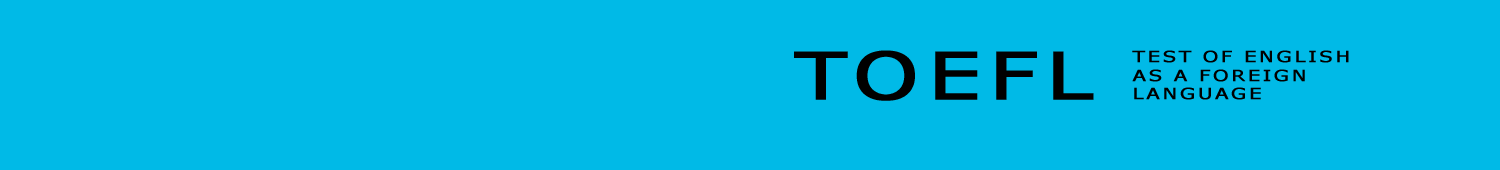
<style>
.page{position:relative;width:1500px;height:170px;background:#00bae7}
.page>*{position:absolute;margin:0}
.t1{font:65.5px "Verdana";letter-spacing:0.1em;color:#000000;font-weight:bold;scale:1.27 1}
.t2{font:15.5px "Verdana";letter-spacing:0.1em;color:#000000;text-transform:uppercase;font-weight:bold;scale:1.27 1}
</style>
<div class="page">
<p class="t1" style="left:794px;top:50px;width:300px;height:51px">TOEFL</p>
<p class="t2" style="left:1132px;top:50px;width:217px;height:50px">Test of English <br>as a Foreign <br>Language</p>
</div>
